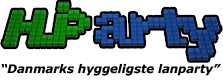
<style>
.page{position:relative;width:223px;height:80px;background:#ffffff}
.page>*{position:absolute;margin:0}
.t1{font:11.7px "Verdana-BoldItalic";color:#000000}
</style>
<div class="page">
<p class="t1" style="left:1px;top:63px;width:220px;height:13px">“Danmarks hyggeligste lanparty”</p>
</div>
